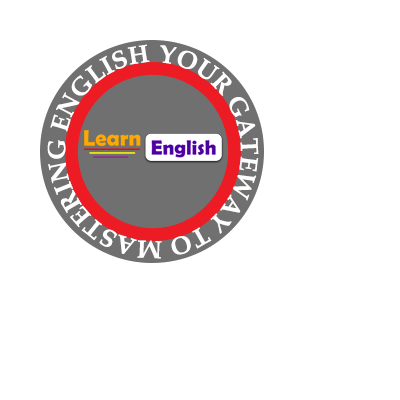
<style>
.page{position:relative;width:400px;height:400px;background:#ffffff}
.page>*{position:absolute;margin:0}
.t1{font:25px "BookAntiqua-Bold";color:#ffffff}
</style>
<div class="page">
<p class="t1" style="left:47px;top:44px;width:212px;height:215px">YOUR GATEWAY TO MASTERING ENGLISH</p>
</div>
